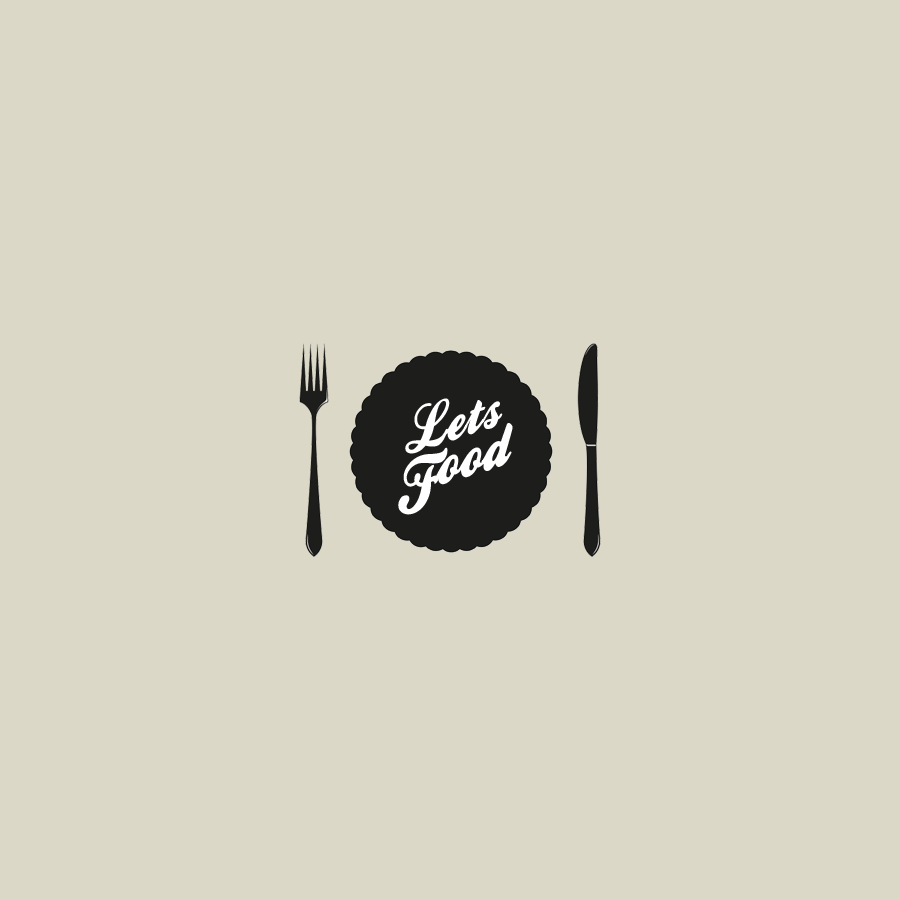
<style>
.page{position:relative;width:900px;height:900px;background:#dbd8c7}
.page>*{position:absolute;margin:0}
.t1{font:54.4px "BallparkWeiner";color:#ffffff;font-style:italic}
.t2{font:60.4px "BallparkWeiner";color:#ffffff;font-style:italic}
.t3{font:66.4px "BallparkWeiner";color:#ffffff;font-style:italic}
</style>
<div class="page">
<p class="t1" style="left:405px;top:398px;width:98px;height:56px;rotate:-17deg"><span class="t2">L</span>ets</p>
<p class="t2" style="left:436px;top:423px;width:77px;height:62px;rotate:-17deg">ood</p>
<p class="t3" style="left:398px;top:447px;width:50px;height:68px;rotate:-17deg">F</p>
</div>
